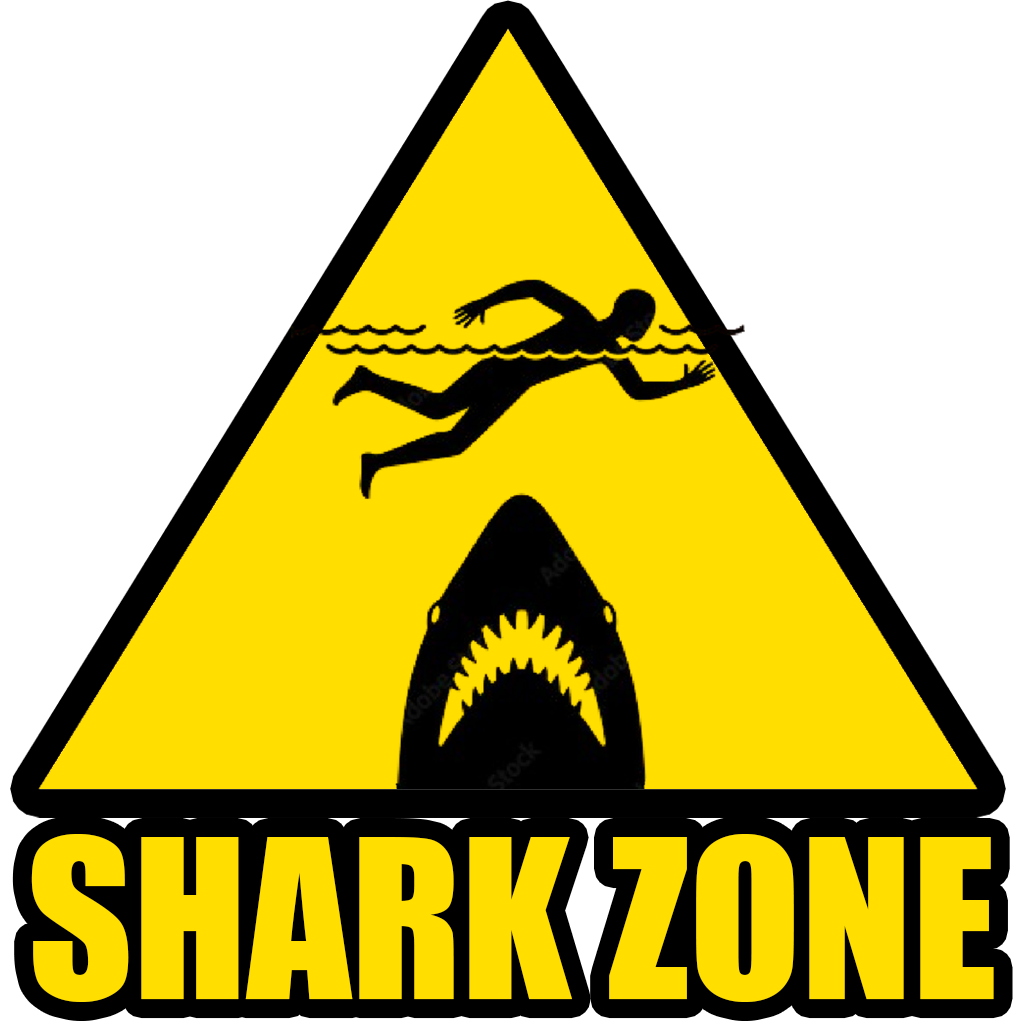
<style>
.page{position:relative;width:1024px;height:1024px;background:#ffffff}
.page>*{position:absolute;margin:0}
.t1{font:205.2px "Impact";color:#ffde00}
</style>
<div class="page">
<p class="t1" style="left:31px;top:834px;width:963px;height:168px">SHARK ZONE</p>
</div>
